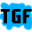
<style>
.page{position:relative;width:32px;height:32px;background:#00b0ff}
.page>*{position:absolute;margin:0}
.t1{font:17.5px "8BITWONDERNominal";color:#000000;scale:0.62 1}
</style>
<div class="page">
<p class="t1" style="left:0px;top:9px;width:32px;height:15px">TGF</p>
</div>
